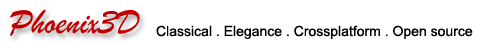
<style>
.page{position:relative;width:500px;height:45px;background:#ffffff}
.page>*{position:absolute;margin:0}
.t1{font:36px "STXingkai";color:#c00000}
.t2{font:14px "ArialMT";color:#000000}
</style>
<div class="page">
<p class="t1" style="left:10px;top:9px;width:130px;height:27px">Phoenix3D</p>
<p class="t2" style="left:156px;top:25px;width:317px;height:14px">Classical . Elegance . Crossplatform . Open source</p>
</div>
